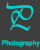
<style>
.page{position:relative;width:40px;height:50px;background:#3e3e3e}
.page>*{position:absolute;margin:0}
.t1{font:37.3px "Vivaldii";color:#00d4cd;scale:0.86 1}
.t2{font:6.7px "ArialMT";color:#00d5cd}
</style>
<div class="page">
<p class="t1" style="left:6px;top:2px;width:28px;height:29px">P</p>
<p class="t2" style="left:2px;top:40px;width:38px;height:7px">Photography</p>
</div>
